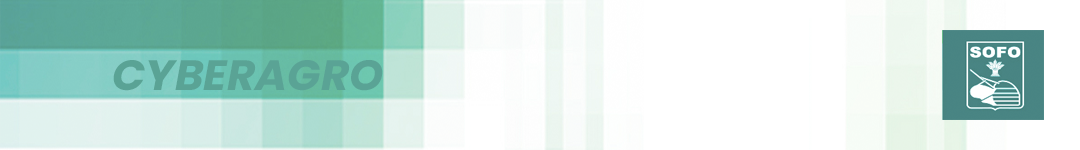
<style>
.page{position:relative;width:1080px;height:150px;background:#ffffff}
.page>*{position:absolute;margin:0}
.t1{font:42.3px "Poppins-BoldItalic";color:#59a395;scale:1.03 1}
</style>
<div class="page">
<p class="t1" style="left:113px;top:60px;width:270px;height:31px">CYBERAGRO</p>
</div>
